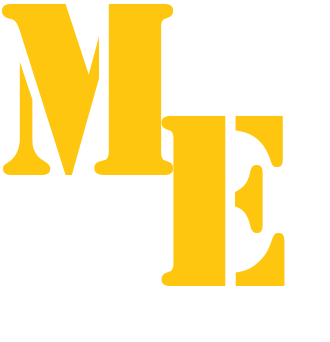
<style>
.page{position:relative;width:330px;height:342px;background:#ffffff}
.page>*{position:absolute;margin:0}
.t1{font:255.8px "Stencil";color:#fec60f;scale:0.94 1}
.t2{font:254.6px "Stencil";color:#fec60f;scale:0.94 1}
</style>
<div class="page">
<p class="t1" style="left:1px;top:3px;width:173px;height:172px">M</p>
<p class="t2" style="left:161px;top:115px;width:124px;height:171px">e</p>
</div>
